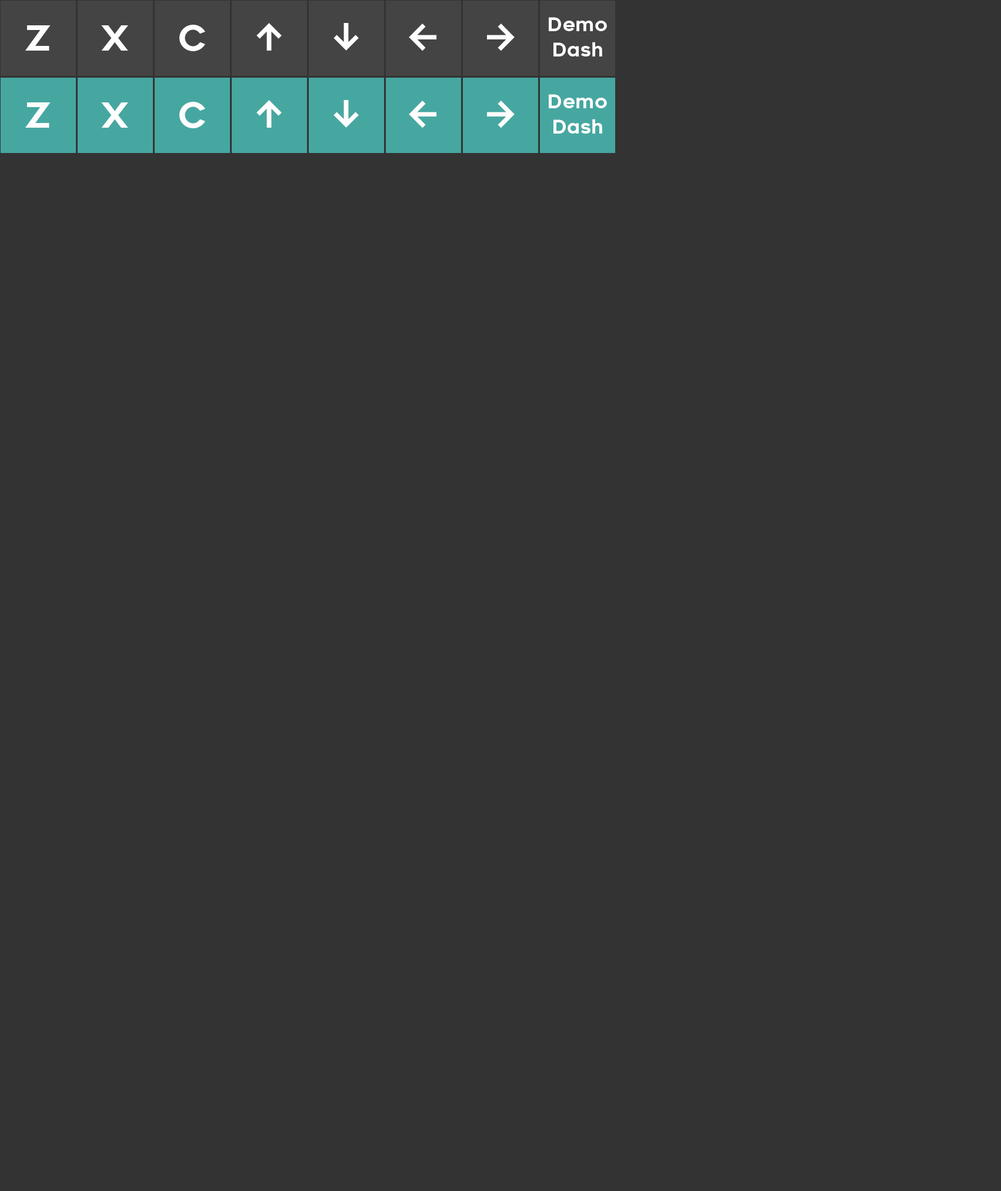
<style>
.page{position:relative;width:1001px;height:1191px;background:#333333}
.page>*{position:absolute;margin:0}
.t1{font:18.8px/25.3px "Renogare-Regular";color:#fefefe}
.t2{font:34.7px "Renogare-Regular";color:#fefefe}
.t3{font:37.7px "Sarasa-Gothic-SC-Bold";color:#fefefe}
</style>
<div class="page">
<p class="t1" style="left:549px;top:17px;width:58px;height:39px;text-align:center">Demo<br>Dash</p>
<p class="t2" style="left:25px;top:25px;width:26px;height:26px">Z</p>
<p class="t2" style="left:101px;top:25px;width:27px;height:26px">X</p>
<p class="t2" style="left:179px;top:25px;width:26px;height:26px">C</p>
<p class="t3" style="left:257px;top:23px;width:25px;height:28px">↑</p>
<p class="t3" style="left:334px;top:23px;width:25px;height:28px">↓</p>
<p class="t3" style="left:409px;top:24px;width:28px;height:27px">←</p>
<p class="t3" style="left:487px;top:24px;width:28px;height:27px">→</p>
<p class="t2" style="left:101px;top:102px;width:27px;height:26px">X</p>
<p class="t2" style="left:179px;top:102px;width:26px;height:26px">C</p>
<p class="t3" style="left:257px;top:100px;width:25px;height:28px">↑</p>
<p class="t3" style="left:334px;top:100px;width:25px;height:28px">↓</p>
<p class="t3" style="left:409px;top:101px;width:28px;height:27px">←</p>
<p class="t3" style="left:487px;top:101px;width:28px;height:27px">→</p>
<p class="t1" style="left:549px;top:94px;width:58px;height:40px;text-align:center">Demo<br>Dash</p>
<p class="t2" style="left:25px;top:102px;width:26px;height:26px">Z</p>
</div>
